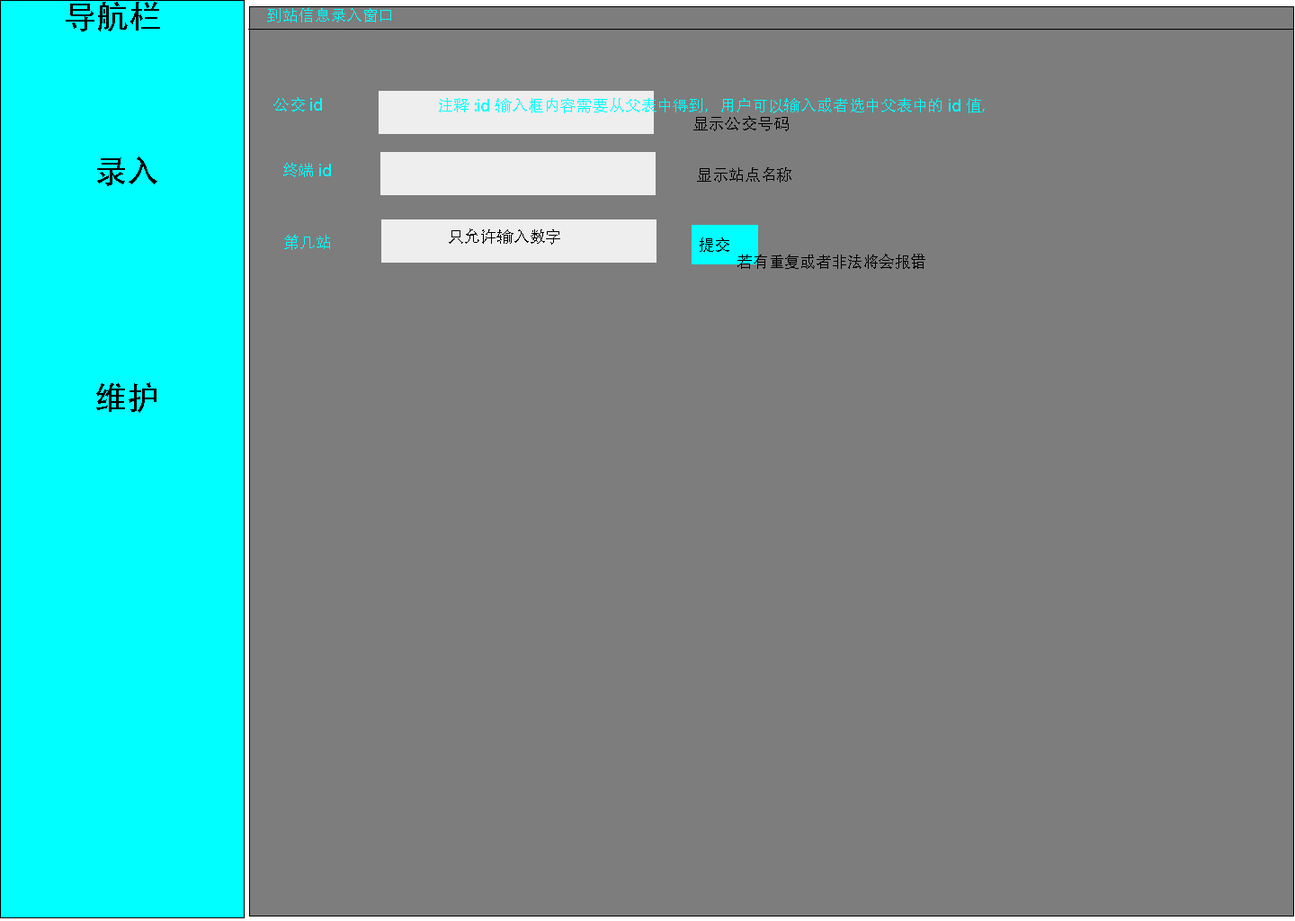
<style>
.page{position:relative;width:1295px;height:921px;background:#7d7d7d}
.page>*{position:absolute;margin:0}
.t1{font:32.4px "AdobeHeitiStd-Regular";color:#000000}
.t2{font:16.2px "AdobeHeitiStd-Regular";color:#00ffff}
.t3{font:16.2px "AdobeHeitiStd-Regular";color:#000000}
</style>
<div class="page">
<p class="t1" style="left:66px;top:2px;width:94px;height:29px">导航栏</p>
<p class="t2" style="left:267px;top:7px;width:124px;height:15px">到站信息录入窗口</p>
<p class="t2" style="left:273px;top:97px;width:49px;height:15px">公交id</p>
<p class="t2" style="left:439px;top:98px;width:546px;height:15px">注释:id输入框内容需要从父表中得到，用户可以输入或者选中父表中的id值，</p>
<p class="t3" style="left:693px;top:116px;width:96px;height:15px">显示公交号码</p>
<p class="t1" style="left:96px;top:156px;width:61px;height:257px;text-align:center">录入<br><br><br><br>维护</p>
<p class="t2" style="left:283px;top:163px;width:48px;height:14px">终端id</p>
<p class="t3" style="left:697px;top:167px;width:94px;height:16px">显示站点名称</p>
<p class="t3" style="left:449px;top:228px;width:111px;height:17px">只允许输入数字</p>
<p class="t2" style="left:284px;top:235px;width:46px;height:15px">第几站</p>
<p class="t3" style="left:700px;top:237px;width:29px;height:15px">提交</p>
<p class="t3" style="left:737px;top:254px;width:188px;height:15px">若有重复或者非法将会报错</p>
</div>
